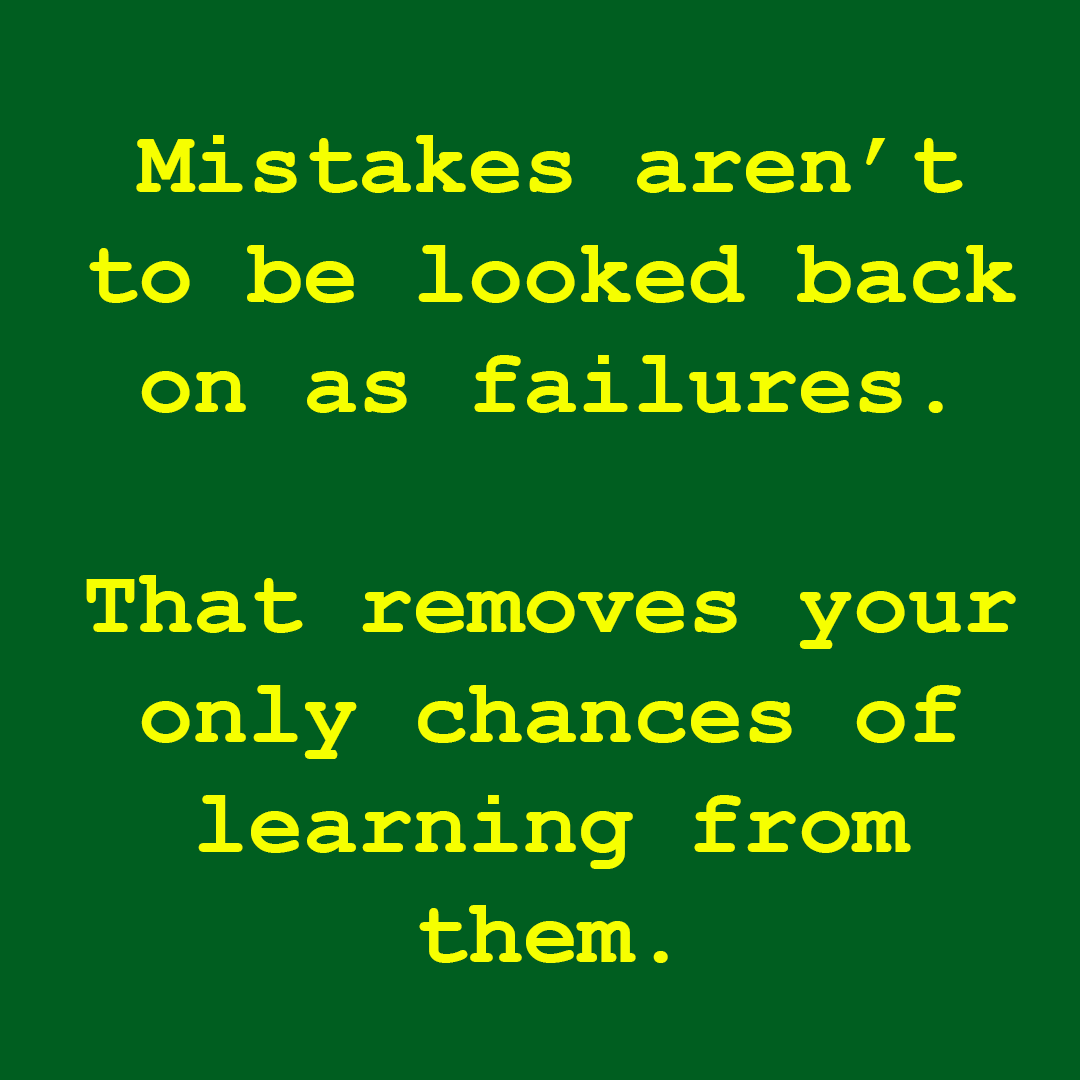
<style>
.page{position:relative;width:1080px;height:1080px;background:#005e20}
.page>*{position:absolute;margin:0}
.t1{font:91.7px "CourierNewPS-BoldMT";color:#f6ff00}
</style>
<div class="page">
<p class="t1" style="left:86px;top:135px;width:930px;height:828px;text-align:center">Mistakes aren’t to be looked back on as failures.<br><br>That removes your only chances of learning from them.</p>
</div>
